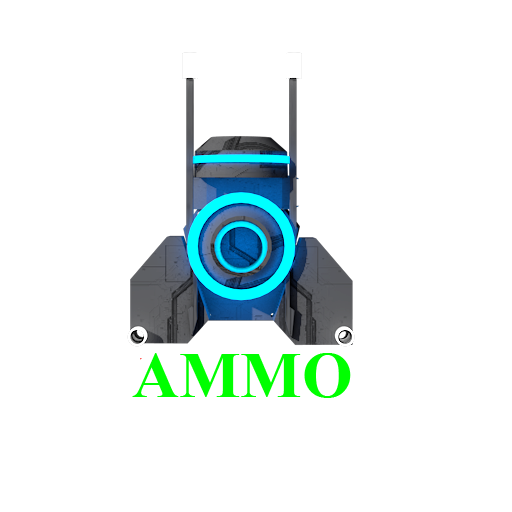
<style>
.page{position:relative;width:512px;height:512px;background:#ffffff}
.page>*{position:absolute;margin:0}
.t1{font:65px "TimesNewRomanPS-BoldMT";color:#00ff00}
</style>
<div class="page">
<p class="t1" style="left:132px;top:353px;width:219px;height:45px">AMMO</p>
</div>
